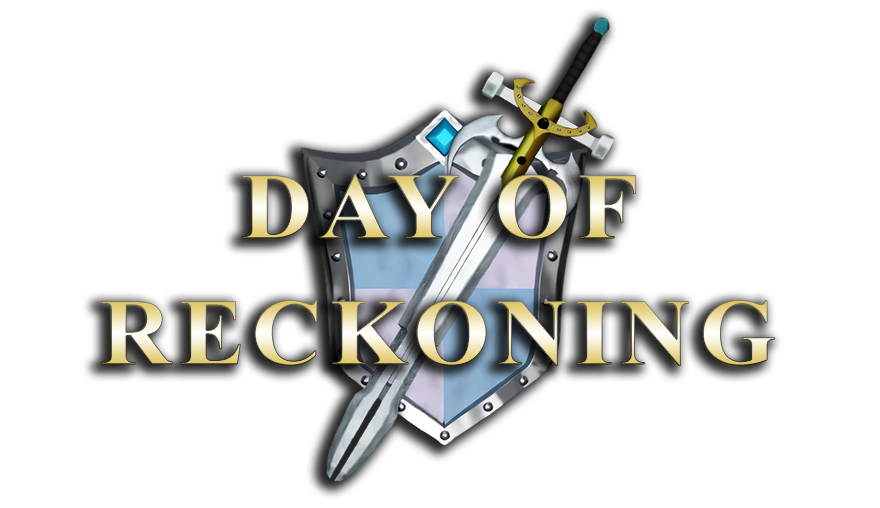
<style>
.page{position:relative;width:880px;height:508px;background:#ffffff}
.page>*{position:absolute;margin:0}
.t1{font:94px "TimesNewRomanPS-BoldMT";letter-spacing:0.07em;scale:1.05 1}
</style>
<div class="page">
<p class="t1" style="left:242px;top:174px;width:394px;height:66px">DAY OF</p>
<p class="t1" style="left:101px;top:300px;width:674px;height:66px">RECKONING</p>
</div>
